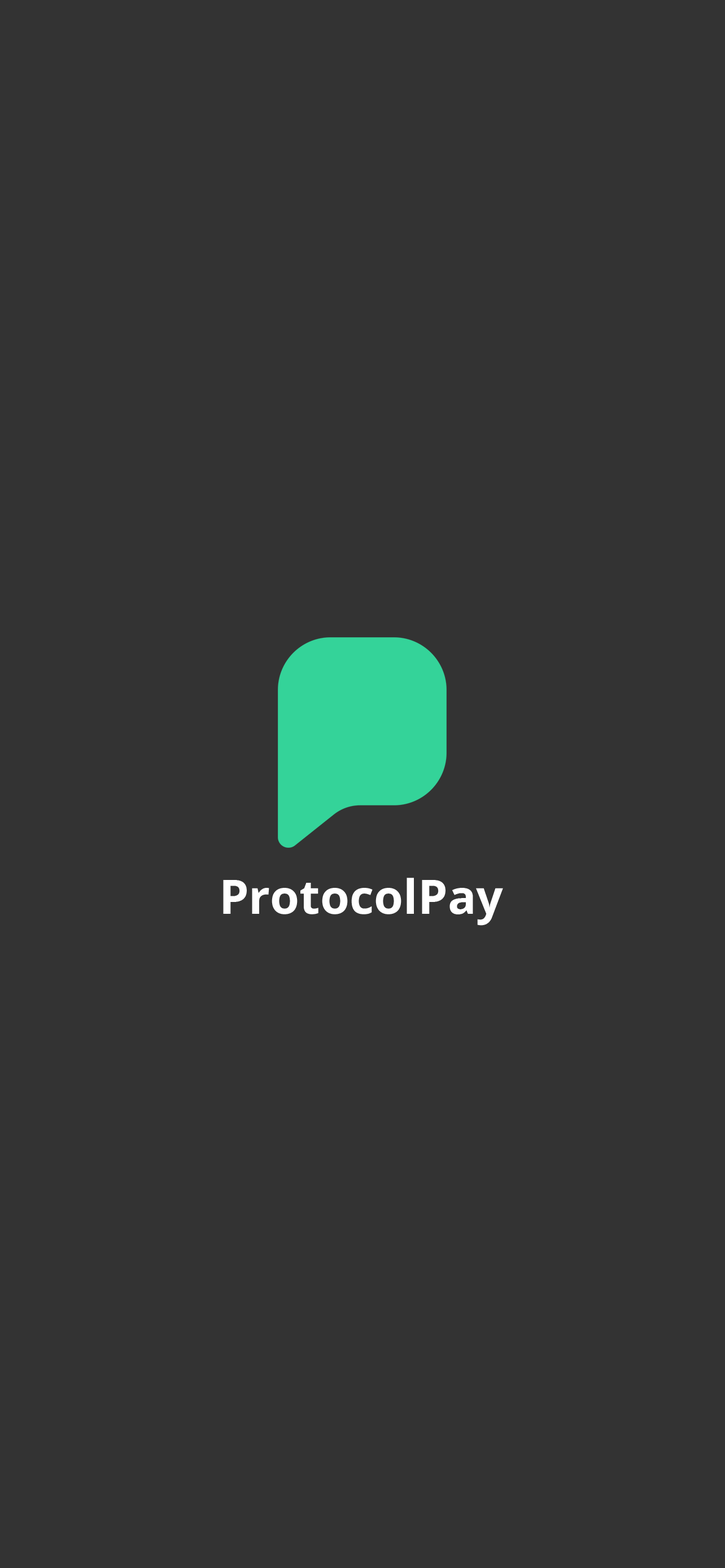
<style>
.page{position:relative;width:725px;height:1568px;background:#333333}
.page>*{position:absolute;margin:0}
.t1{font:47.4px "OpenSans-Bold";color:#ffffff}
</style>
<div class="page">
<p class="t1" style="left:223px;top:878px;width:280px;height:48px">ProtocolPay</p>
</div>
